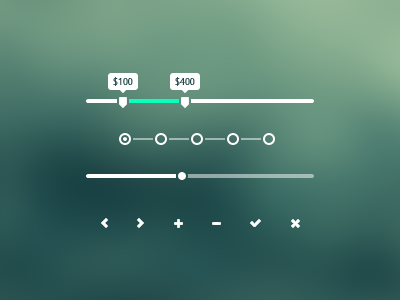
<style>
.page{position:relative;width:400px;height:300px}
.page>*{position:absolute;margin:0}
.t1{font:9px "DroidSans";color:#1d4546}
</style>
<div class="page">
<p class="t1" style="left:113px;top:77px;width:20px;height:9px">$100</p>
<p class="t1" style="left:175px;top:77px;width:20px;height:9px">$400</p>
</div>
